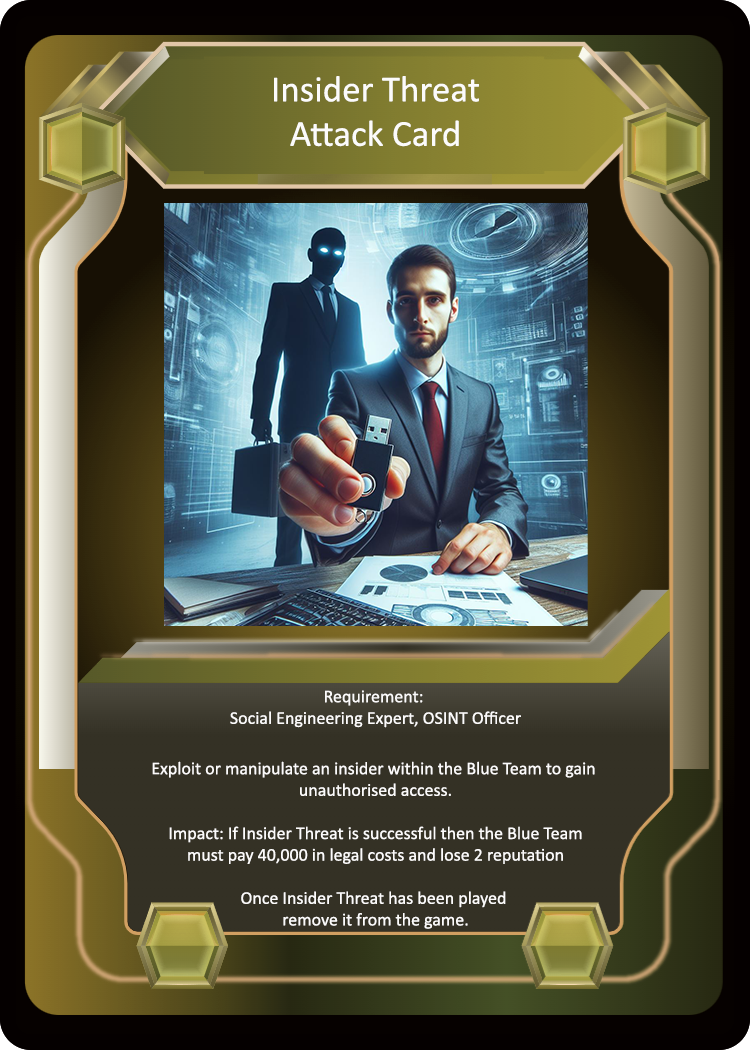
<style>
.page{position:relative;width:750px;height:1050px}
.page>*{position:absolute;margin:0}
.t1{font:37px "Calibri";color:#fcfbfb}
.t2{font:18px "Calibri";color:#fcfbfb}
</style>
<div class="page">
<p class="t1" style="left:274px;top:76px;width:205px;height:71px;text-align:center">Insider Threat<br>Attack Card</p>
<p class="t2" style="left:152px;top:690px;width:443px;height:239px;text-align:center">Requirement: <br>Social Engineering Expert, OSINT Officer<br><br>Exploit or manipulate an insider within the Blue Team to gain <br>unauthorised access.<br><br>Impact: If Insider Threat is successful then the Blue Team<br>must pay 40,000 in legal costs and lose 2 reputation<br><br>Once Insider Threat has been played <br>remove it from the game.</p>
</div>
